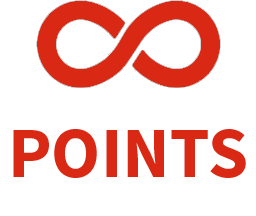
<style>
.page{position:relative;width:256px;height:216px;background:#ffffff}
.page>*{position:absolute;margin:0}
.t1{font:72px "SourceSansPro-Bold";color:#d92915}
</style>
<div class="page">
<p class="t1" style="left:13px;top:129px;width:233px;height:49px">POINTS</p>
</div>
